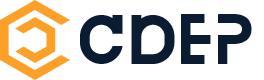
<style>
.page{position:relative;width:264px;height:80px;background:#ffffff}
.page>*{position:absolute;margin:0}
.t1{font:70.1px "MogantyRegular";letter-spacing:0.075em;color:#0b1c32}
.t2{font:61.9px "Blanka-Regular";letter-spacing:0.1em;color:#0b1c32}
.t3{font:61.9px "Blanka-Regular";color:#0b1c32}
</style>
<div class="page">
<p class="t1" style="left:80px;top:14px;width:172px;height:50px">CD<span class="t2">E</span><span class="t3">P</span></p>
</div>
